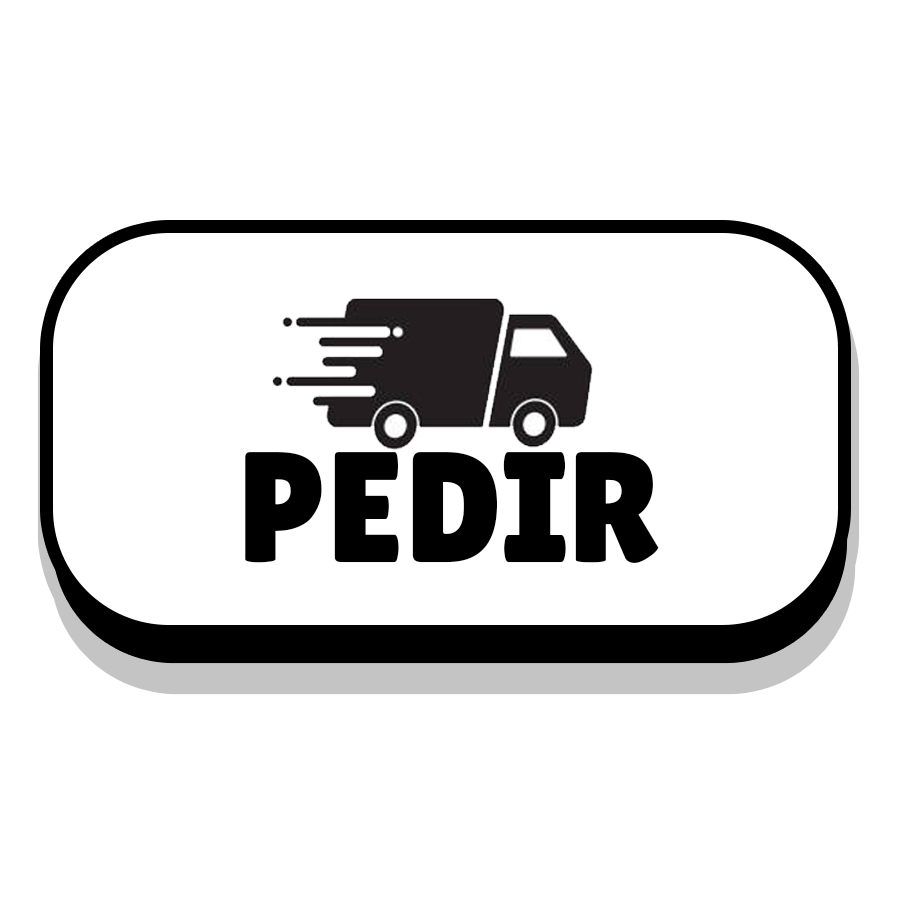
<style>
.page{position:relative;width:900px;height:900px;background:#ffffff}
.page>*{position:absolute;margin:0}
.t1{font:156.7px "LilitaOne";color:#000000}
</style>
<div class="page">
<p class="t1" style="left:245px;top:452px;width:414px;height:111px">PEDIR</p>
</div>
